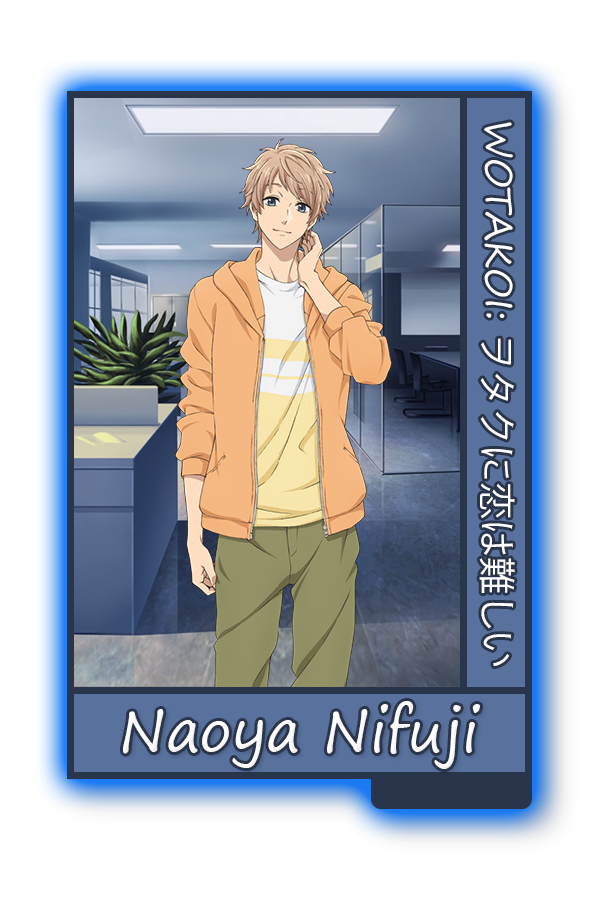
<style>
.page{position:relative;width:600px;height:900px;background:#ffffff}
.page>*{position:absolute;margin:0}
.t1{font:37px "SegoePrint";color:#ffffff}
.t2{font:37.3px "KozGoPr6N-Regular";color:#ffffff}
.t3{font:57.8px "SegoePrint";color:#ffffff}
</style>
<div class="page">
<p class="t1" style="left:484px;top:122px;width:29px;height:196px;rotate:90deg">WOTAKOI:</p>
<p class="t2" style="left:479px;top:338px;width:36px;height:329px;rotate:90deg">ヲタクに恋は難しい</p>
<p class="t3" style="left:123px;top:701px;width:357px;height:68px">Naoya Nifuji</p>
</div>
